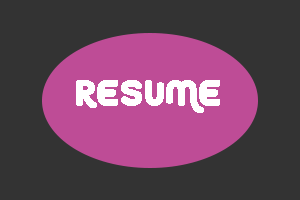
<style>
.page{position:relative;width:300px;height:200px;background:#333333}
.page>*{position:absolute;margin:0}
.t1{font:37.5px "RoundyRainbows";color:#ffffff}
</style>
<div class="page">
<p class="t1" style="left:76px;top:80px;width:144px;height:33px">Resume</p>
</div>
